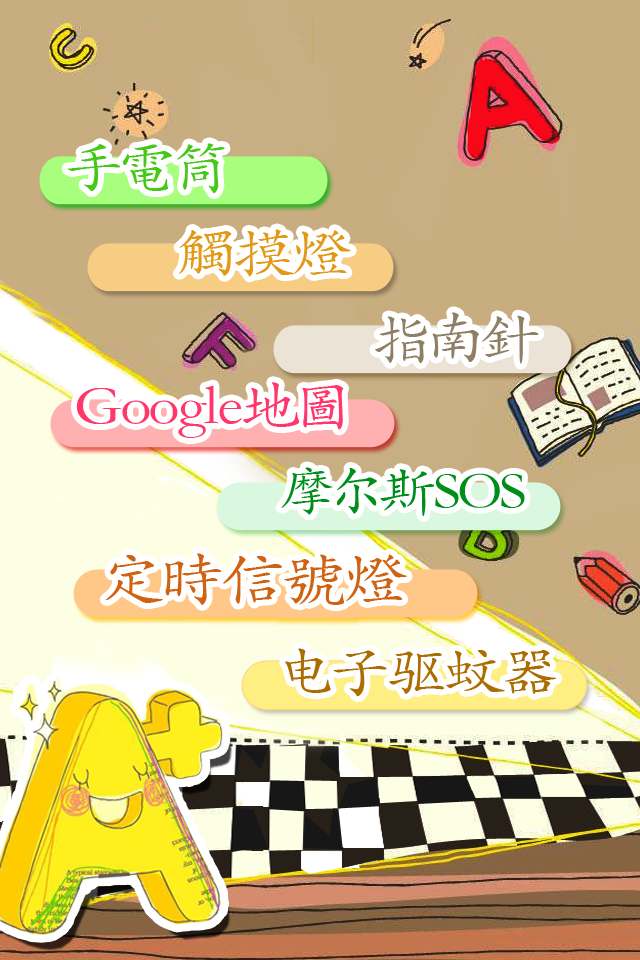
<style>
.page{position:relative;width:640px;height:960px;background:#c7ad80}
.page>*{position:absolute;margin:0}
.t1{font:56.2px "STKaiti";color:#45c917;scale:1.11 1}
.t2{font:56.2px "STKaiti";color:#e39918;scale:1.11 1}
.t3{font:56.2px "STKaiti";color:#8f7f64;scale:1.11 1}
.t4{font:56.2px "STKaiti";color:#ff376b;scale:1.11 1}
.t5{font:52.5px "STKaiti";color:#008e1b;scale:1.11 1}
.t6{font:60px "STKaiti";color:#cf6213;scale:1.11 1}
.t7{font:56.2px "STKaiti";color:#ac6d00;scale:1.11 1}
</style>
<div class="page">
<p class="t1" style="left:67px;top:143px;width:158px;height:50px">手電筒</p>
<p class="t2" style="left:178px;top:229px;width:173px;height:48px">觸摸燈</p>
<p class="t3" style="left:375px;top:312px;width:164px;height:52px">指南針</p>
<p class="t4" style="left:76px;top:382px;width:268px;height:56px">Google地圖</p>
<p class="t5" style="left:281px;top:467px;width:244px;height:49px">摩尔斯SOS</p>
<p class="t6" style="left:105px;top:553px;width:302px;height:52px">定時信號燈</p>
<p class="t7" style="left:285px;top:648px;width:272px;height:49px">电子驱蚊器</p>
</div>
